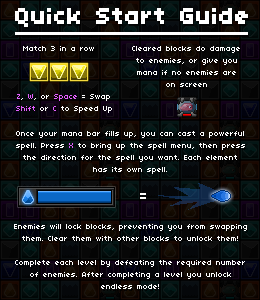
<style>
.page{position:relative;width:260px;height:300px}
.page>*{position:absolute;margin:0}
.t1{font:24px "04b03";color:#ffffff;font-weight:bold}
.t2{font:8px "04b03";color:#ffffff}
.t3{font:8px/12px "04b03";color:#ffffff}
.t4{font:8px/12px "04b03";color:#e35fff}
.t5{font:16px "04b03";color:#ffffff}
</style>
<div class="page">
<p class="t1" style="left:15px;top:8px;width:233px;height:19px">Quick Start Guide</p>
<p class="t2" style="left:23px;top:46px;width:71px;height:5px">Match 3 in a row</p>
<p class="t3" style="left:132px;top:46px;width:108px;height:41px;text-align:center">Cleared blocks do damage<br>to enemies, or give you<br>mana if no enemies are<br>on screen</p>
<p class="t3" style="left:16px;top:94px;width:96px;height:19px;text-align:center"><span class="t4">Z</span>, <span class="t4">W</span>, or <span class="t4">Space</span> = Swap<br><span class="t4">Shift</span> or <span class="t4">C</span> to Speed Up</p>
<p class="t3" style="left:16px;top:131px;width:229px;height:43px;text-align:center">Once your mana bar fills up, you can cast a powerful<br>spell. Press <span class="t4">X</span> to bring up the spell menu, then press<br>the direction for the spell you want. Each element<br>has its own spell.</p>
<p class="t5" style="left:140px;top:193px;width:6px;height:6px">=</p>
<p class="t3" style="left:14px;top:224px;width:233px;height:65px;text-align:center">Enemies will lock blocks, preventing you from swapping<br>them. Clear them with other blocks to unlock them!<br><br>Complete each level by defeating the required number<br>of enemies. After completing a level you unlock<br>endless mode!</p>
</div>
